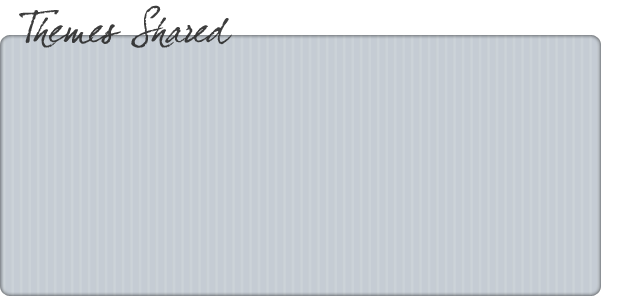
<style>
.page{position:relative;width:620px;height:300px;background:#c5ccd4}
.page>*{position:absolute;margin:0}
.t1{font:39px "DearJoefour";letter-spacing:-0.04em;color:#2a2a2a}
</style>
<div class="page">
<p class="t1" style="left:19px;top:5px;width:213px;height:43px">Themes Shared</p>
</div>
